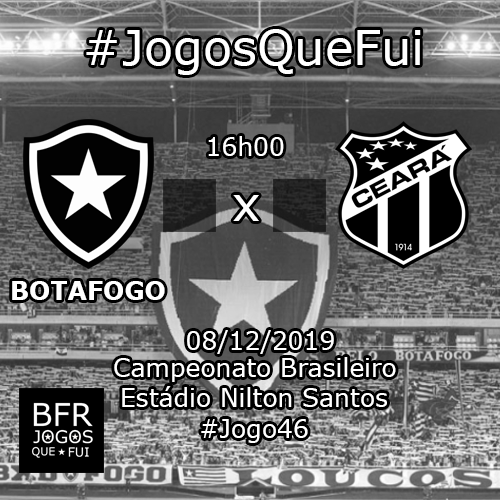
<style>
.page{position:relative;width:500px;height:500px}
.page>*{position:absolute;margin:0}
.t1{font:48px "Verdana";color:#ffffff}
.t2{font:25px "Verdana";color:#ffffff}
.t3{font:25px "Verdana-Bold";color:#ffffff}
</style>
<div class="page">
<p class="t1" style="left:86px;top:29px;width:335px;height:46px">#JogosQueFui</p>
<p class="t2" style="left:208px;top:136px;width:76px;height:20px">16h00</p>
<p class="t1" style="left:233px;top:195px;width:26px;height:26px">x</p>
<p class="t3" style="left:12px;top:281px;width:153px;height:19px">BOTAFOGO</p>
<p class="t2" style="left:187px;top:330px;width:147px;height:24px">08/12/2019</p>
<p class="t2" style="left:114px;top:357px;width:282px;height:25px">Campeonato Brasileiro</p>
<p class="t2" style="left:122px;top:386px;width:265px;height:21px">Estádio Nilton Santos</p>
<p class="t2" style="left:201px;top:419px;width:107px;height:24px">#Jogo46</p>
</div>
